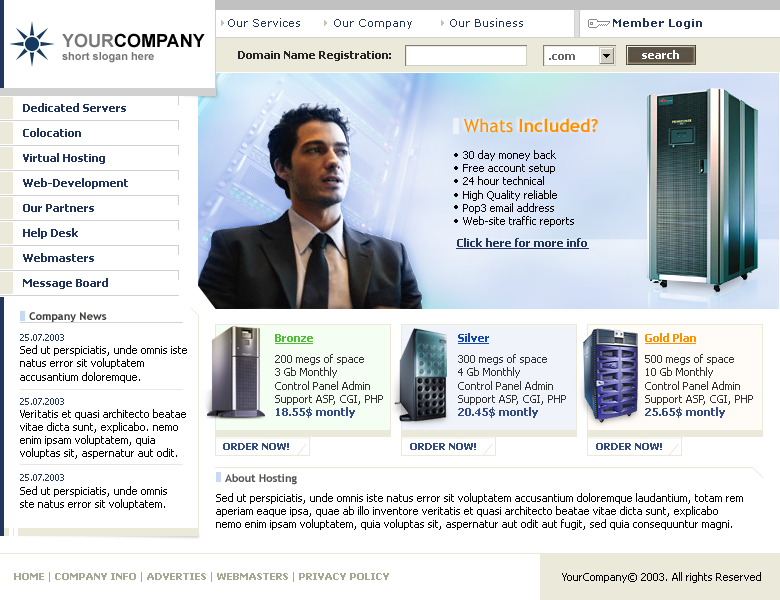
<style>
.page{position:relative;width:780px;height:600px;background:#ffffff}
.page>*{position:absolute;margin:0}
.t1{font:11px "Verdana";color:#22355c}
.t2{font:11px "Verdana-Bold";color:#22355c}
.t3{font:11px "Arial-BoldMT";color:#747474}
.t4{font:18px "Arial-BoldMT";color:#777777}
.t5{font:18px "Arial-BoldMT";color:#000000}
.t6{font:11px "Tahoma-Bold";color:#262626}
.t7{font:11px "Tahoma-Bold";color:#676767}
.t8{font:11px "Tahoma-Bold";color:#ffffff}
.t9{font:11px/25px "Tahoma-Bold";color:#22355c}
.t10{font:18px "TrebuchetMS-Bold";color:#ff9000}
.t11{font:18px "TrebuchetMS";color:#ff9000}
.t12{font:11px "TrebuchetMS-Bold";color:#3f3f3d}
.t13{font:11px "Tahoma";color:#000000}
.t14{font:9px "Tahoma";color:#22355c}
.t15{font:11px "Tahoma";color:#313131}
.t16{font:11px/8px "Tahoma-Bold";color:#4cc032}
.t17{font:11px "Tahoma-Bold";color:#344e84}
.t18{font:11px/8px "Tahoma-Bold";color:#1145b1}
.t19{font:11px/8px "Tahoma-Bold";color:#ff9000}
.t20{font:10px "Tahoma-Bold";color:#344e84}
.t21{font:11px "TrebuchetMS-Bold";color:#545451}
.t22{font:10px "Tahoma-Bold";color:#a8a794}
.t23{font:10px "Tahoma";color:#a8a794}
</style>
<div class="page">
<p class="t1" style="left:228px;top:18px;width:474px;height:11px">Our Services        Our Company         Our Business                      <span class="t2">Member Login</span></p>
<p class="t3" style="left:62px;top:33px;width:143px;height:30px"><span class="t4">YOUR</span><span class="t5">COMPANY<br></span>short slogan here</p>
<p class="t6" style="left:238px;top:51px;width:153px;height:10px">Domain Name Registration:</p>
<p class="t7" style="left:549px;top:54px;width:26px;height:6px">.com</p>
<p class="t8" style="left:642px;top:50px;width:37px;height:9px">search</p>
<p class="t9" style="left:23px;top:103px;width:105px;height:186px">Dedicated Servers<br>Colocation<br>Virtual Hosting<br>Web-Development<br>Our Partners<br>Help Desk<br>Webmasters<br>Message Board</p>
<p class="t10" style="left:464px;top:118px;width:134px;height:15px"><span class="t11">Whats </span>Included?</p>
<p class="t12" style="left:29px;top:312px;width:78px;height:11px">Company News</p>
<p class="t13" style="left:20px;top:334px;width:167px;height:176px"><span class="t14">25.07.2003<br></span>Sed ut perspiciatis, unde omnis iste <br>natus error sit voluptatem <br>accusantium doloremque.<br><br><span class="t14">25.07.2003<br></span>Veritatis et quasi architecto beatae <br>vitae dicta sunt, explicabo. nemo <br>enim ipsam voluptatem, quia <br>voluptas sit, aspernatur aut odit.<br><br><span class="t14">25.07.2003<br></span>Sed ut perspiciatis, unde omnis <br>ste natus error sit voluptatem.</p>
<p class="t15" style="left:275px;top:334px;width:108px;height:84px"><span class="t16">Bronze <br><br></span>200 megs of space<br>3 Gb Monthly<br>Control Panel Admin<br>Support ASP, CGI, PHP<br><span class="t17">18.55$ montly</span></p>
<p class="t15" style="left:458px;top:333px;width:108px;height:85px"><span class="t18">Silver<br><br></span>300 megs of space<br>4 Gb Monthly<br>Control Panel Admin<br>Support ASP, CGI, PHP<br><span class="t17">20.45$ montly</span></p>
<p class="t15" style="left:645px;top:333px;width:108px;height:85px"><span class="t19">Gold Plan<br><br></span>500 megs of space<br>10 Gb Monthly<br>Control Panel Admin<br>Support ASP, CGI, PHP<br><span class="t17">25.65$ montly</span></p>
<p class="t20" style="left:223px;top:443px;width:66px;height:7px">ORDER NOW!</p>
<p class="t20" style="left:410px;top:443px;width:66px;height:7px">ORDER NOW!</p>
<p class="t20" style="left:596px;top:443px;width:66px;height:7px">ORDER NOW!</p>
<p class="t21" style="left:225px;top:473px;width:72px;height:12px">About Hosting</p>
<p class="t13" style="left:216px;top:493px;width:527px;height:37px">Sed ut perspiciatis, unde omnis iste natus error sit voluptatem accusantium doloremque laudantium, totam rem <br>aperiam eaque ipsa, quae ab illo inventore veritatis et quasi architecto beatae vitae dicta sunt, explicabo<br>nemo enim ipsam voluptatem, quia voluptas sit, aspernatur aut odit aut fugit, sed quia consequuntur magni.</p>
<p class="t22" style="left:14px;top:572px;width:375px;height:10px">HOME <span class="t23">|</span> COMPANY INFO <span class="t23">|</span> ADVERTIES <span class="t23">|</span> WEBMASTERS <span class="t23">| </span>PRIVACY POLICY</p>
<p class="t13" style="left:562px;top:572px;width:199px;height:11px">YourCompany© 2003. All rights Reserved</p>
</div>
